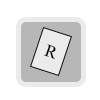
<style>
.page{position:relative;width:100px;height:100px;background:#ffffff}
.page>*{position:absolute;margin:0}
.t1{font:16.7px "Georgia";color:#030303}
</style>
<div class="page">
<p class="t1" style="left:44px;top:44px;width:12px;height:15px;rotate:19deg">R</p>
</div>
